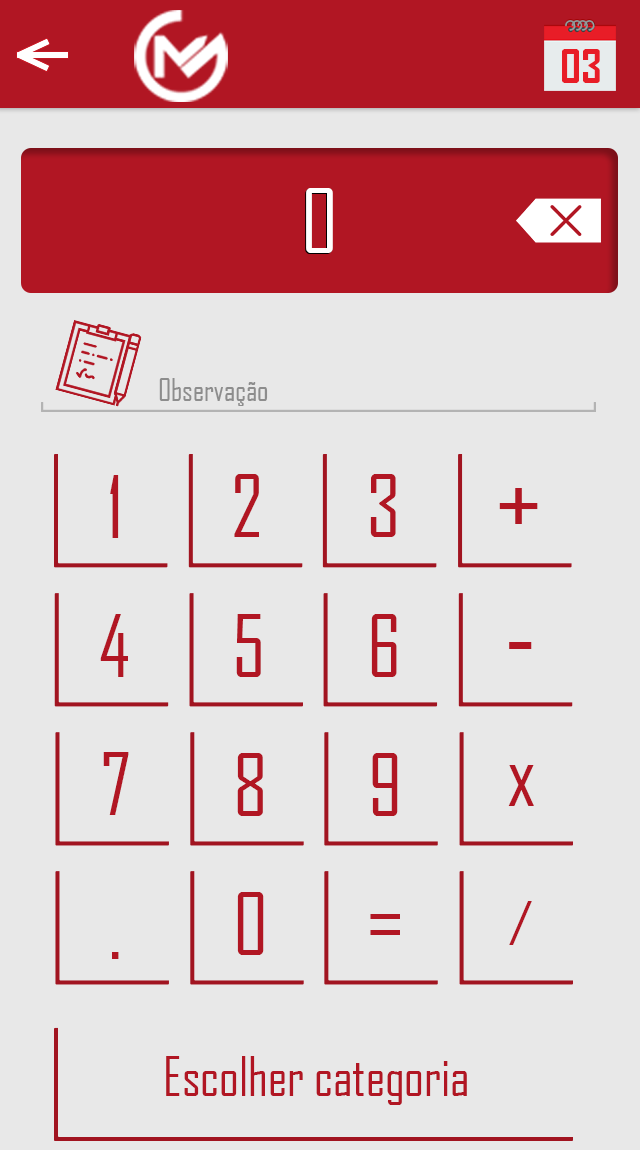
<style>
.page{position:relative;width:640px;height:1150px;background:#e8e8e8}
.page>*{position:absolute;margin:0}
.t1{font:45.3px "AgencyFB-Bold";color:#e81d27}
.t2{font:84.7px "AgencyFB-Reg";color:#ffffff}
.t3{font:29.6px "AgencyFB-Reg";color:#8d8d8d}
.t4{font:81.5px "AgencyFB-Reg";color:#b11623}
.t5{font:110.2px "AgencyFB-Reg";color:#b11623}
.t6{font:87.3px "AgencyFB-Reg";color:#b11623}
.t7{font:58px "AgencyFB-Reg";color:#b11623}
.t8{font:51.7px "AgencyFB-Reg";color:#b11623}
</style>
<div class="page">
<p class="t1" style="left:562px;top:49px;width:38px;height:34px">03</p>
<p class="t2" style="left:306px;top:188px;width:27px;height:65px">0</p>
<p class="t3" style="left:159px;top:378px;width:109px;height:28px">Observação</p>
<p class="t4" style="left:110px;top:475px;width:9px;height:63px">1</p>
<p class="t4" style="left:234px;top:474px;width:25px;height:63px">2</p>
<p class="t4" style="left:370px;top:474px;width:26px;height:63px">3</p>
<p class="t5" style="left:499px;top:488px;width:39px;height:36px">+</p>
<p class="t4" style="left:100px;top:614px;width:28px;height:63px">4</p>
<p class="t4" style="left:236px;top:614px;width:25px;height:63px">5</p>
<p class="t4" style="left:371px;top:614px;width:26px;height:63px">6</p>
<p class="t5" style="left:509px;top:642px;width:23px;height:7px">-</p>
<p class="t4" style="left:103px;top:752px;width:26px;height:63px">7</p>
<p class="t4" style="left:237px;top:753px;width:26px;height:63px">8</p>
<p class="t4" style="left:372px;top:753px;width:26px;height:63px">9</p>
<p class="t6" style="left:508px;top:765px;width:26px;height:41px">x</p>
<p class="t4" style="left:237px;top:892px;width:27px;height:63px">0</p>
<p class="t7" style="left:509px;top:901px;width:23px;height:44px">/</p>
<p class="t6" style="left:370px;top:914px;width:30px;height:21px">=</p>
<p class="t6" style="left:112px;top:952px;width:7px;height:7px">.</p>
<p class="t8" style="left:166px;top:1056px;width:301px;height:49px">Escolher categoria</p>
</div>
